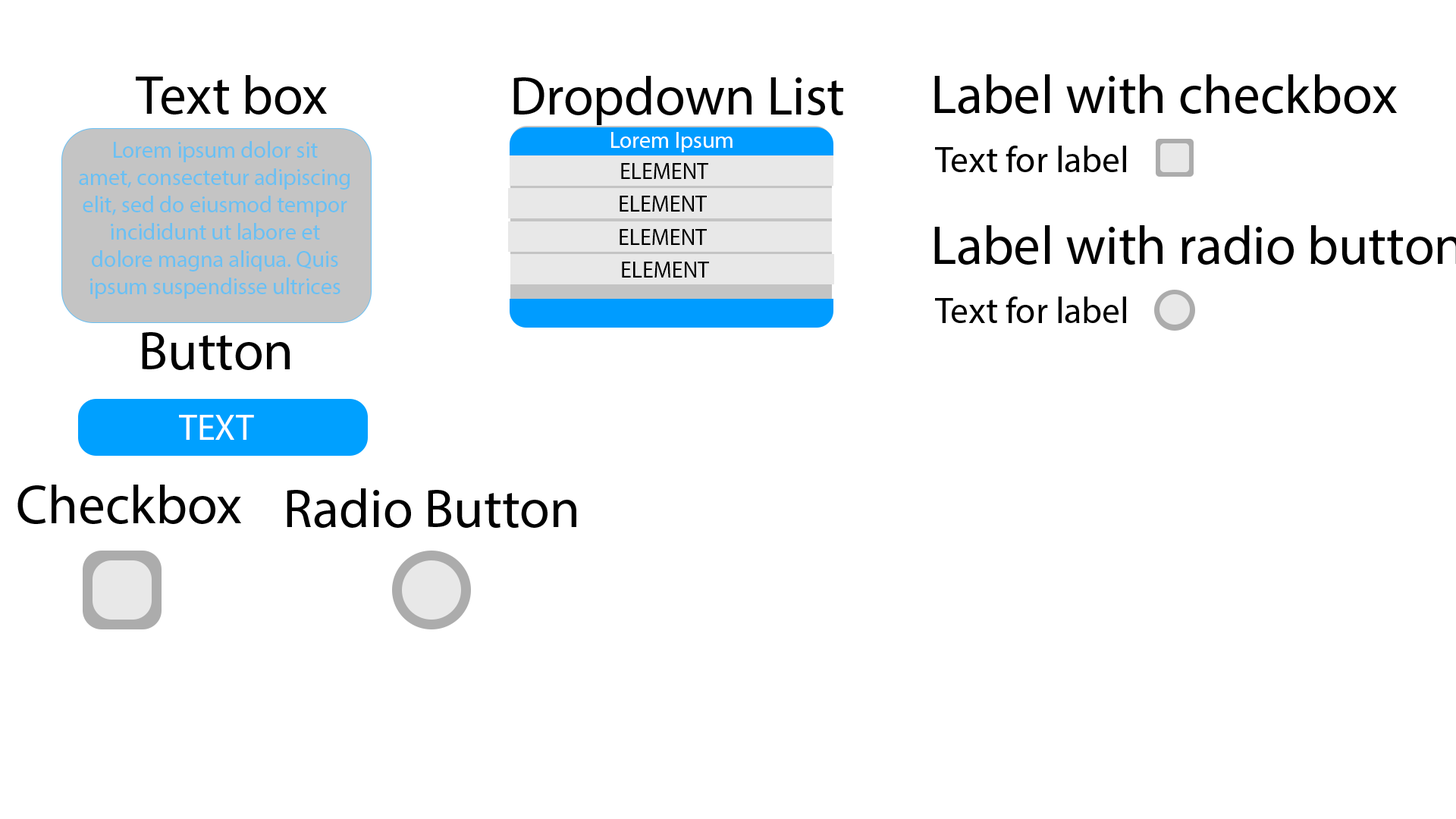
<style>
.page{position:relative;width:1456px;height:819px;background:#ffffff}
.page>*{position:absolute;margin:0}
.t1{font:54.6px "MyriadPro-Regular";color:#000000}
.t2{font:22.7px "MyriadPro-Regular";color:#ffffff}
.t3{font:22.7px "MyriadPro-Regular";color:#6ac0f3}
.t4{font:36.4px "MyriadPro-Regular";color:#000000}
.t5{font:22.7px "MyriadPro-Regular";color:#000000}
.t6{font:36.4px "MyriadPro-Regular";color:#ffffff}
</style>
<div class="page">
<p class="t1" style="left:136px;top:75px;width:191px;height:40px">Text box</p>
<p class="t1" style="left:513px;top:76px;width:330px;height:49px">Dropdown List</p>
<p class="t1" style="left:934px;top:74px;width:463px;height:40px">Label with checkbox</p>
<p class="t2" style="left:611px;top:132px;width:122px;height:20px">Lorem Ipsum</p>
<p class="t3" style="left:79px;top:141px;width:271px;height:158px;text-align:center">Lorem ipsum dolor sit amet, consectetur adipiscing elit, sed do eiusmod tempor incididunt ut labore et dolore magna aliqua. Quis ipsum suspendisse ultrices gravida. Risus commodo viverra maecenas accumsan lacus vel facilisis.</p>
<p class="t4" style="left:935px;top:146px;width:191px;height:26px">Text for label</p>
<p class="t5" style="left:621px;top:163px;width:87px;height:16px">ELEMENT</p>
<p class="t5" style="left:620px;top:196px;width:87px;height:16px">ELEMENT</p>
<p class="t5" style="left:620px;top:229px;width:87px;height:16px">ELEMENT</p>
<p class="t5" style="left:622px;top:262px;width:87px;height:16px">ELEMENT</p>
<p class="t4" style="left:935px;top:297px;width:191px;height:26px">Text for label</p>
<p class="t1" style="left:142px;top:332px;width:148px;height:38px">Button</p>
<p class="t6" style="left:179px;top:415px;width:75px;height:25px">TEXT</p>
<p class="t1" style="left:17px;top:485px;width:224px;height:39px">Checkbox</p>
<p class="t1" style="left:287px;top:488px;width:289px;height:40px">Radio Button</p>
</div>
